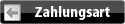
<style>
.page{position:relative;width:125px;height:24px;background:#4d4d4d}
.page>*{position:absolute;margin:0}
.t1{font:13px "KozGoPro-Heavy";color:#ffffff}
</style>
<div class="page">
<p class="t1" style="left:35px;top:6px;width:75px;height:14px">Zahlungsart</p>
</div>
